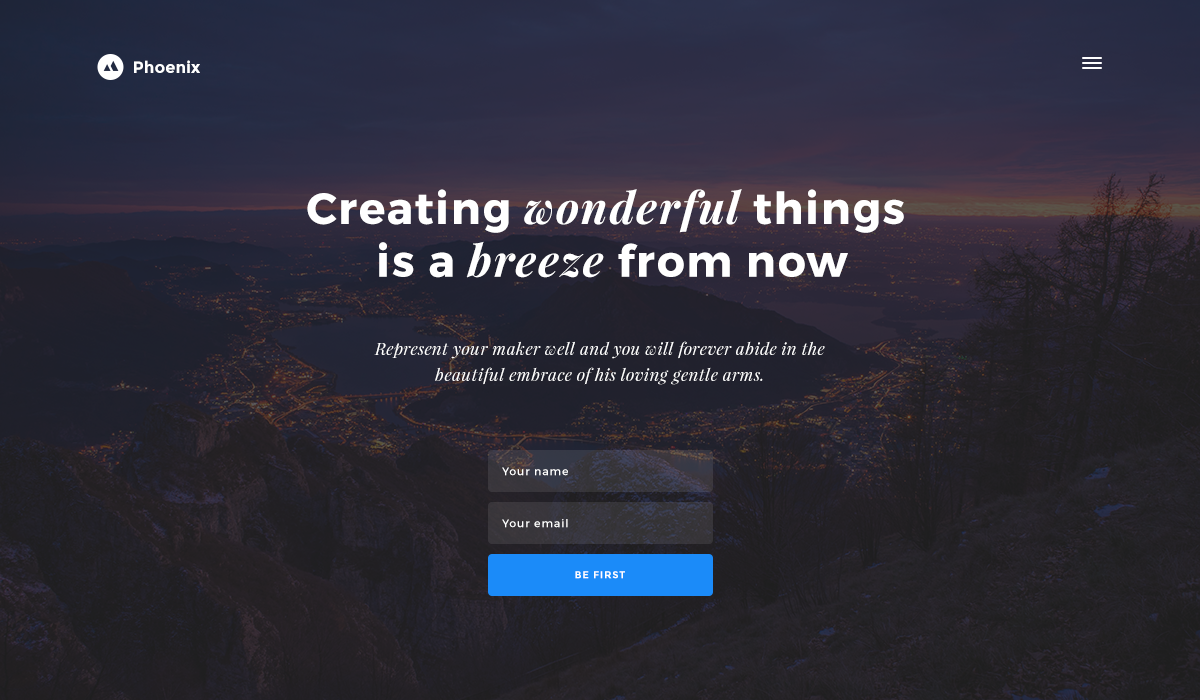
<style>
.page{position:relative;width:1200px;height:700px}
.page>*{position:absolute;margin:0}
.t1{font:16.4px "Montserrat-Bold";color:#ffffff}
.t2{font:44px "Montserrat-Bold";letter-spacing:0.04em;color:#ffffff}
.t3{font:44px "PlayfairDisplay-BoldItalic";letter-spacing:0.04em;color:#ffffff}
.t4{font:17px/26px "PlayfairDisplay-Italic";letter-spacing:0.025em;color:#ffffff}
.t5{font:11px "Montserrat-Regular";letter-spacing:0.08em;color:#ffffff}
.t6{font:10px "Montserrat-Bold";letter-spacing:0.08em;color:#ffffff;text-transform:uppercase}
</style>
<div class="page">
<p class="t1" style="left:134px;top:60px;width:66px;height:13px">Phoenix</p>
<p class="t2" style="left:307px;top:189px;width:597px;height:89px;text-align:center">Creating <span class="t3">wonderful</span> things<br> is a <span class="t3">breeze</span> from now</p>
<p class="t4" style="left:374px;top:341px;width:451px;height:44px;text-align:center">Represent your maker well and you will forever abide in the beautiful embrace of his loving gentle arms.</p>
<p class="t5" style="left:502px;top:467px;width:66px;height:9px">Your name</p>
<p class="t5" style="left:502px;top:519px;width:66px;height:9px">Your email</p>
<p class="t6" style="left:575px;top:571px;width:50px;height:8px">be first</p>
</div>
